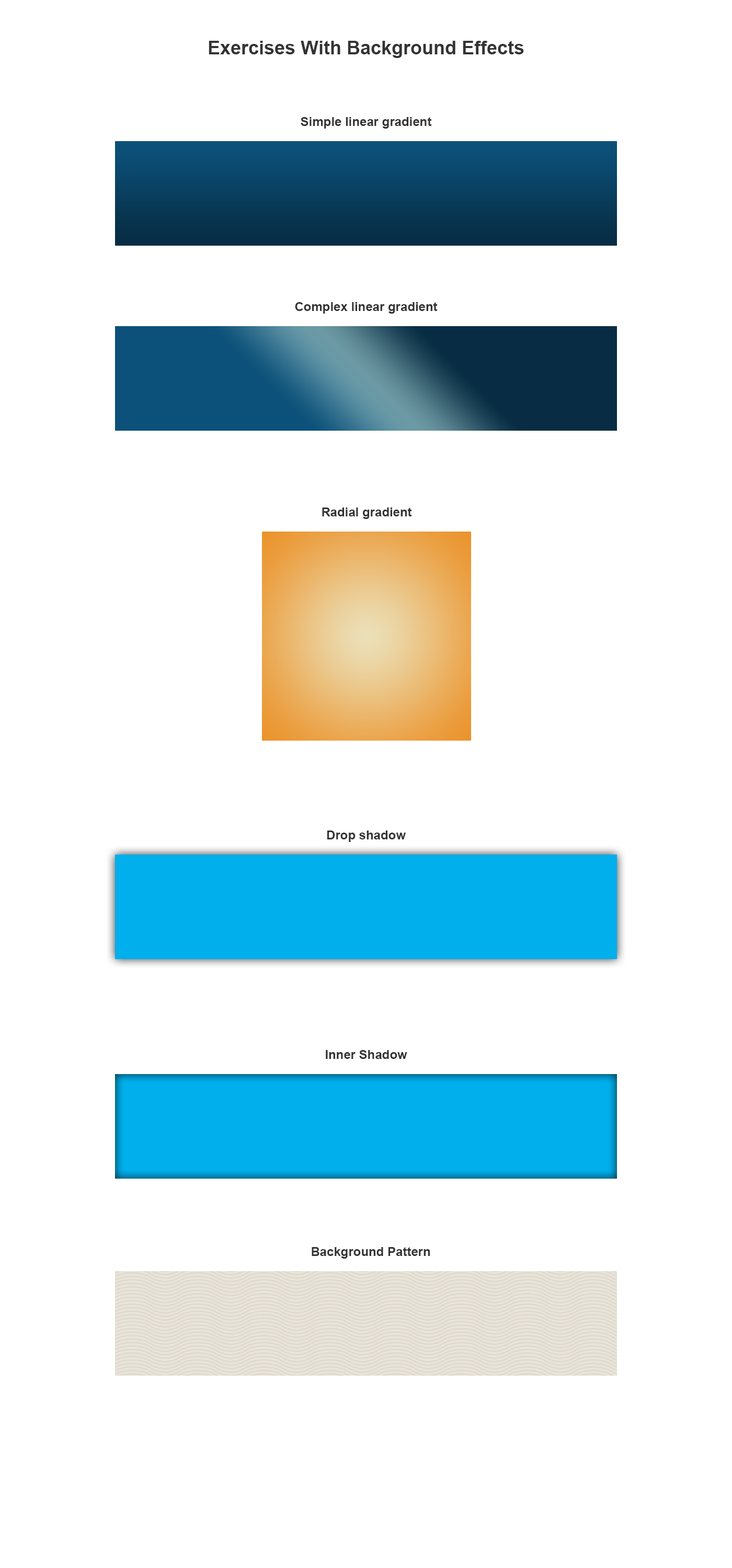
<style>
.page{position:relative;width:732px;height:1568px;background:#ffffff}
.page>*{position:absolute;margin:0}
.t1{font:18.8px "Arial-BoldMT";color:#333333}
.t2{font:12.5px "Arial-BoldMT";color:#333333}
</style>
<div class="page">
<p class="t1" style="left:209px;top:41px;width:315px;height:17px">Exercises With Background Effects</p>
<p class="t2" style="left:301px;top:117px;width:131px;height:12px">Simple linear gradient</p>
<p class="t2" style="left:295px;top:302px;width:142px;height:12px">Complex linear gradient</p>
<p class="t2" style="left:322px;top:508px;width:90px;height:11px">Radial gradient</p>
<p class="t2" style="left:327px;top:831px;width:79px;height:11px">Drop shadow</p>
<p class="t2" style="left:326px;top:1050px;width:81px;height:9px">Inner Shadow</p>
<p class="t2" style="left:312px;top:1247px;width:118px;height:12px">Background Pattern</p>
</div>
